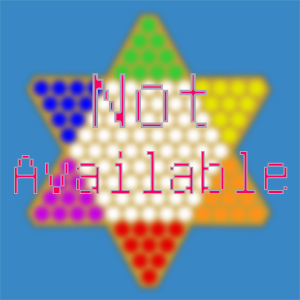
<style>
.page{position:relative;width:300px;height:300px;background:#3987c5}
.page>*{position:absolute;margin:0}
.t1{font:87.5px "GNUUnifontFull"}
.t2{font:62.5px "GNUUnifontFull"}
</style>
<div class="page">
<p class="t1" style="left:92px;top:73px;width:115px;height:55px">Not</p>
<p class="t2" style="left:14px;top:151px;width:274px;height:43px">Available</p>
</div>
